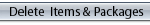
<style>
.page{position:relative;width:150px;height:25px}
.page>*{position:absolute;margin:0}
.t1{font:13px "Myriad-Roman";color:#000000}
</style>
<div class="page">
<p class="t1" style="left:10px;top:6px;width:134px;height:13px">Delete  Items &amp; Packages</p>
</div>
